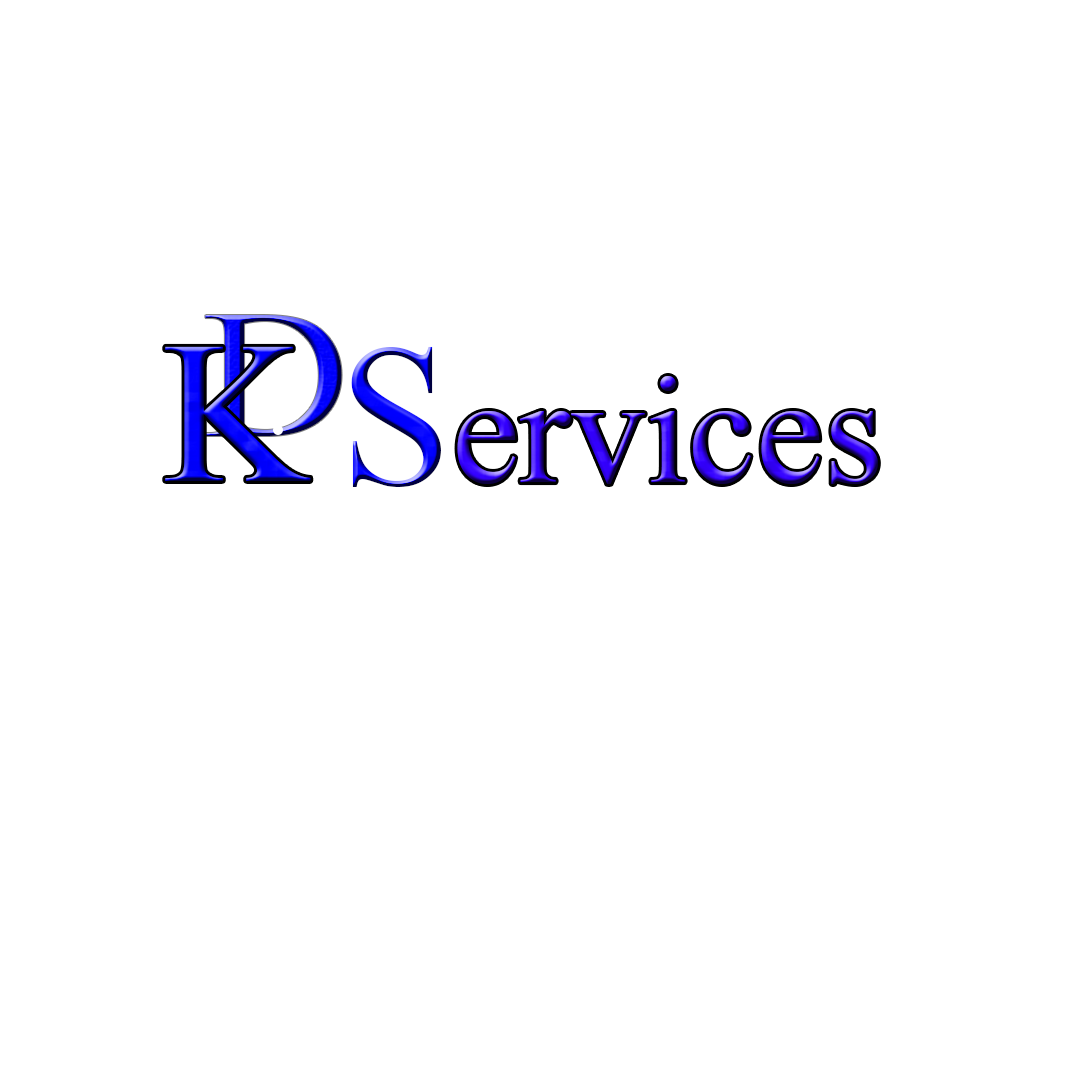
<style>
.page{position:relative;width:1080px;height:1080px;background:#ffffff}
.page>*{position:absolute;margin:0}
.t1{font:182.7px "TimesNewRomanPSMT";scale:1.12 1}
.t2{font:203px "TimesNewRomanPSMT"}
.t3{font:203.2px "TimesNewRomanPSMT"}
.t4{font:152.4px "TimesNewRomanPSMT"}
</style>
<div class="page">
<p class="t1" style="left:205px;top:315px;width:137px;height:121px">D</p>
<p class="t2" style="left:165px;top:346px;width:146px;height:135px">K</p>
<p class="t3" style="left:351px;top:346px;width:90px;height:141px">S</p>
<p class="t4" style="left:457px;top:376px;width:421px;height:108px">ervices</p>
</div>
